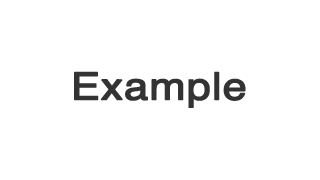
<style>
.page{position:relative;width:320px;height:180px;background:#ffffff}
.page>*{position:absolute;margin:0}
.t1{font:37.8px "Helvetica";color:#333333;font-weight:bold;scale:1.15 1}
</style>
<div class="page">
<p class="t1" style="left:74px;top:71px;width:172px;height:37px">Example</p>
</div>
